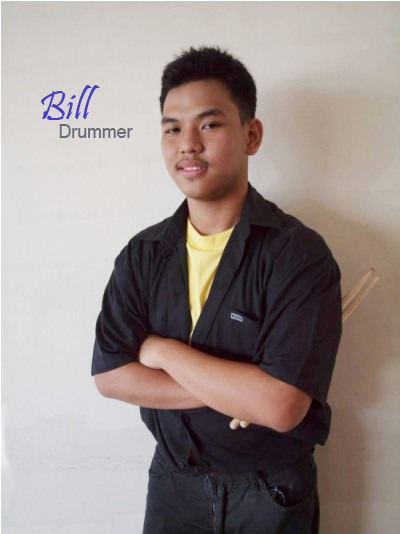
<style>
.page{position:relative;width:400px;height:534px}
.page>*{position:absolute;margin:0}
.t1{font:41.8px "Pristina-Regular";color:#443dc5}
.t2{font:21.2px "Raavi";color:#676c77;scale:0.93 1}
</style>
<div class="page">
<p class="t1" style="left:41px;top:85px;width:59px;height:35px">Bill</p>
<p class="t2" style="left:59px;top:124px;width:74px;height:14px">Drummer</p>
</div>
